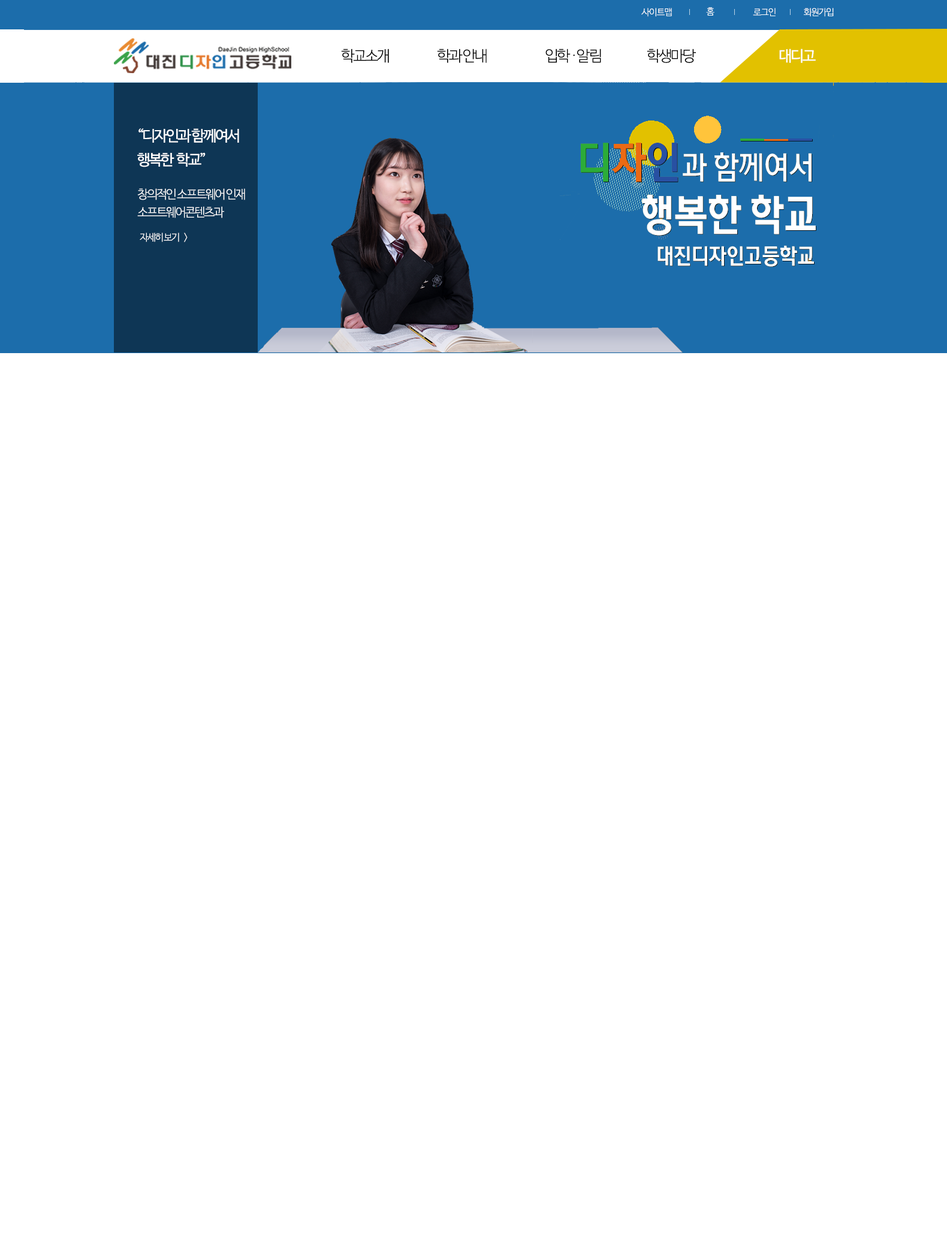
<style>
.page{position:relative;width:947px;height:1259px;background:#ffffff}
.page>*{position:absolute;margin:0}
.t1{font:9px "NanumBarunGothicLight";letter-spacing:-0.05em;color:#ffffff}
.t2{font:15px "NanumBarunGothicLight";letter-spacing:-0.1em;color:#000000}
.t3{font:15px "NanumBarunGothicLight";letter-spacing:-0.05em;color:#000000}
.t4{font:15px "NanumBarunGothic";letter-spacing:-0.1em;color:#ffffff}
.t5{font:15px/24px "NanumBarunGothic";letter-spacing:-0.1em;color:#ffffff}
.t6{font:12px/18px "NanumBarunGothicLight";letter-spacing:-0.1em;color:#ffffff}
.t7{font:9.6px "NanumBarunGothicLight";letter-spacing:-0.1em;color:#ffffff}
</style>
<div class="page">
<p class="t1" style="left:641px;top:8px;width:31px;height:9px">사이트맵</p>
<p class="t1" style="left:706px;top:7px;width:9px;height:9px">홈</p>
<p class="t1" style="left:753px;top:8px;width:23px;height:8px">로그인</p>
<p class="t1" style="left:804px;top:8px;width:30px;height:9px">회원가입</p>
<p class="t2" style="left:341px;top:49px;width:48px;height:14px">학교소개</p>
<p class="t2" style="left:437px;top:49px;width:50px;height:14px">학과 안내</p>
<p class="t3" style="left:546px;top:49px;width:55px;height:14px"><span class="t2">입학 </span>·알림</p>
<p class="t2" style="left:647px;top:49px;width:49px;height:14px">학생마당</p>
<p class="t4" style="left:779px;top:49px;width:37px;height:14px">대디고</p>
<p class="t5" style="left:137px;top:128px;width:102px;height:39px">“디자인과 함께여서<br>행복한  학교”</p>
<p class="t6" style="left:137px;top:188px;width:108px;height:30px">창의적인 소프트웨어 인재 <br>소프트웨어콘텐츠과</p>
<p class="t7" style="left:140px;top:233px;width:48px;height:9px">자세히 보기    &gt;</p>
</div>
